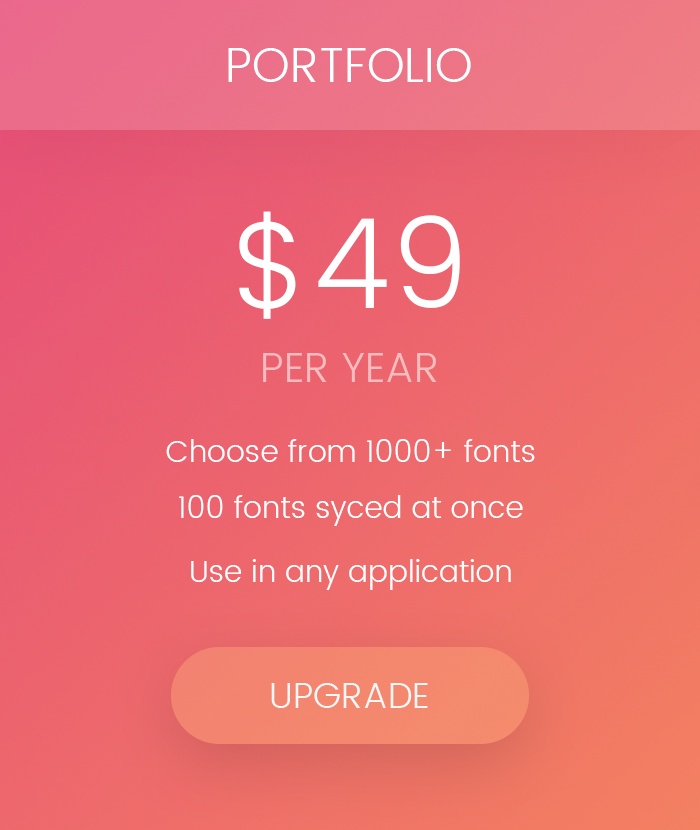
<style>
.page{position:relative;width:700px;height:830px}
.page>*{position:absolute;margin:0}
.t1{font:48px "Poppins-Light";color:#ffffff}
.t2{font:124px "Poppins-Light";color:#ffffff}
.t3{font:42px "Poppins-Light";color:#f6bcbf}
.t4{font:30px "Poppins-Light";color:#ffffff}
.t5{font:36px "Poppins-Light";color:#f7f7f7}
</style>
<div class="page">
<p class="t1" style="left:228px;top:48px;width:243px;height:34px">PORTFOLIO</p>
<p class="t2" style="left:239px;top:211px;width:221px;height:108px">$49</p>
<p class="t3" style="left:263px;top:353px;width:174px;height:29px">PER YEAR</p>
<p class="t4" style="left:166px;top:439px;width:369px;height:23px">Choose from 1000+ fonts</p>
<p class="t4" style="left:179px;top:495px;width:344px;height:31px">100 fonts syced at once</p>
<p class="t4" style="left:191px;top:559px;width:320px;height:31px">Use in any application</p>
<p class="t5" style="left:271px;top:683px;width:157px;height:25px">UPGRADE</p>
</div>
